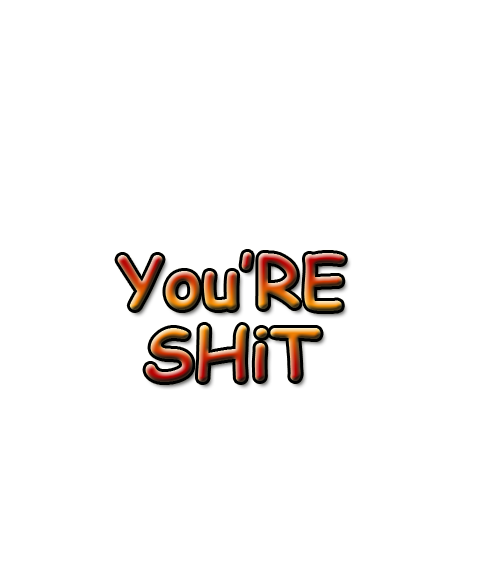
<style>
.page{position:relative;width:500px;height:567px;background:#ffffff}
.page>*{position:absolute;margin:0}
.t1{font:72px/75px "ComicSansMS-Bold"}
</style>
<div class="page">
<p class="t1" style="left:117px;top:252px;width:228px;height:130px;text-align:center">You’RE<br>SHiT</p>
</div>
